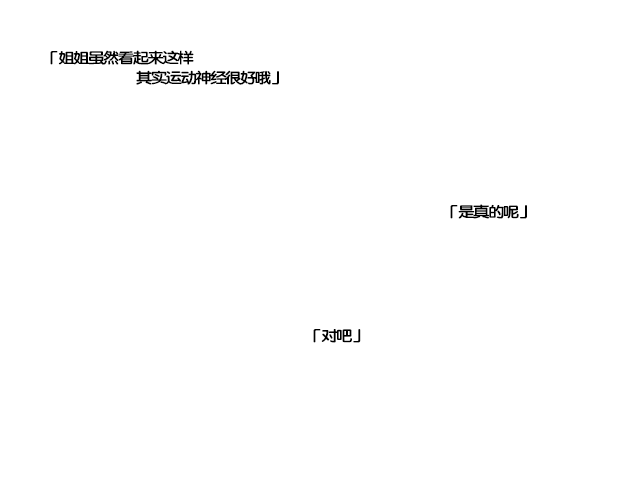
<style>
.page{position:relative;width:640px;height:480px;background:#ffffff}
.page>*{position:absolute;margin:0}
.t1{font:15px/20px "FZY4K--GBK1-0";letter-spacing:-0.13em;color:#000000;scale:1.14 1}
.t2{font:15px "FZY4K--GBK1-0";letter-spacing:-0.13em;color:#000000;scale:1.14 1}
</style>
<div class="page">
<p class="t1" style="left:50px;top:50px;width:229px;height:35px">「姐姐虽然看起来这样<br>   其实运动神经很好哦」</p>
<p class="t2" style="left:450px;top:204px;width:77px;height:15px">「是真的呢」</p>
<p class="t2" style="left:313px;top:329px;width:48px;height:14px">「对吧」</p>
</div>
